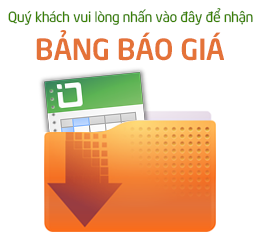
<style>
.page{position:relative;width:262px;height:243px;background:#ffffff}
.page>*{position:absolute;margin:0}
.t1{font:14px "UTM-Neo-Sans-Intel";color:#398000}
.t2{font:29px "UTMNeoSansIntelBold";color:#e47238}
</style>
<div class="page">
<p class="t1" style="left:8px;top:8px;width:245px;height:17px">Quý khách vui lòng nhấn vào đây để nhận</p>
<p class="t2" style="left:36px;top:30px;width:188px;height:31px">BẢNG BÁO GIÁ</p>
</div>
